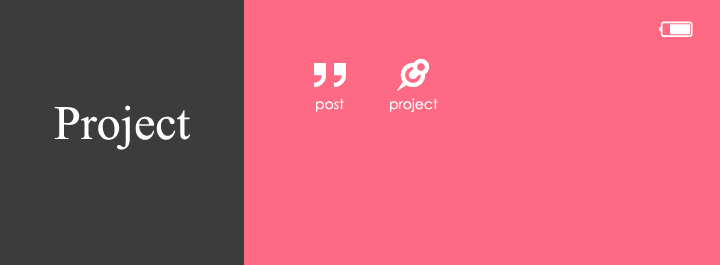
<style>
.page{position:relative;width:720px;height:265px;background:#fe6a84}
.page>*{position:absolute;margin:0}
.t1{font:14px "CenturyGothic";color:#fbfbfb}
.t2{font:14px "CenturyGothic";color:#ffffff}
.t3{font:48px "TimesNewRomanPSMT";color:#ffffff}
</style>
<div class="page">
<p class="t1" style="left:316px;top:98px;width:28px;height:14px">post</p>
<p class="t2" style="left:390px;top:98px;width:48px;height:14px">project</p>
<p class="t3" style="left:54px;top:105px;width:137px;height:45px">Project</p>
</div>
